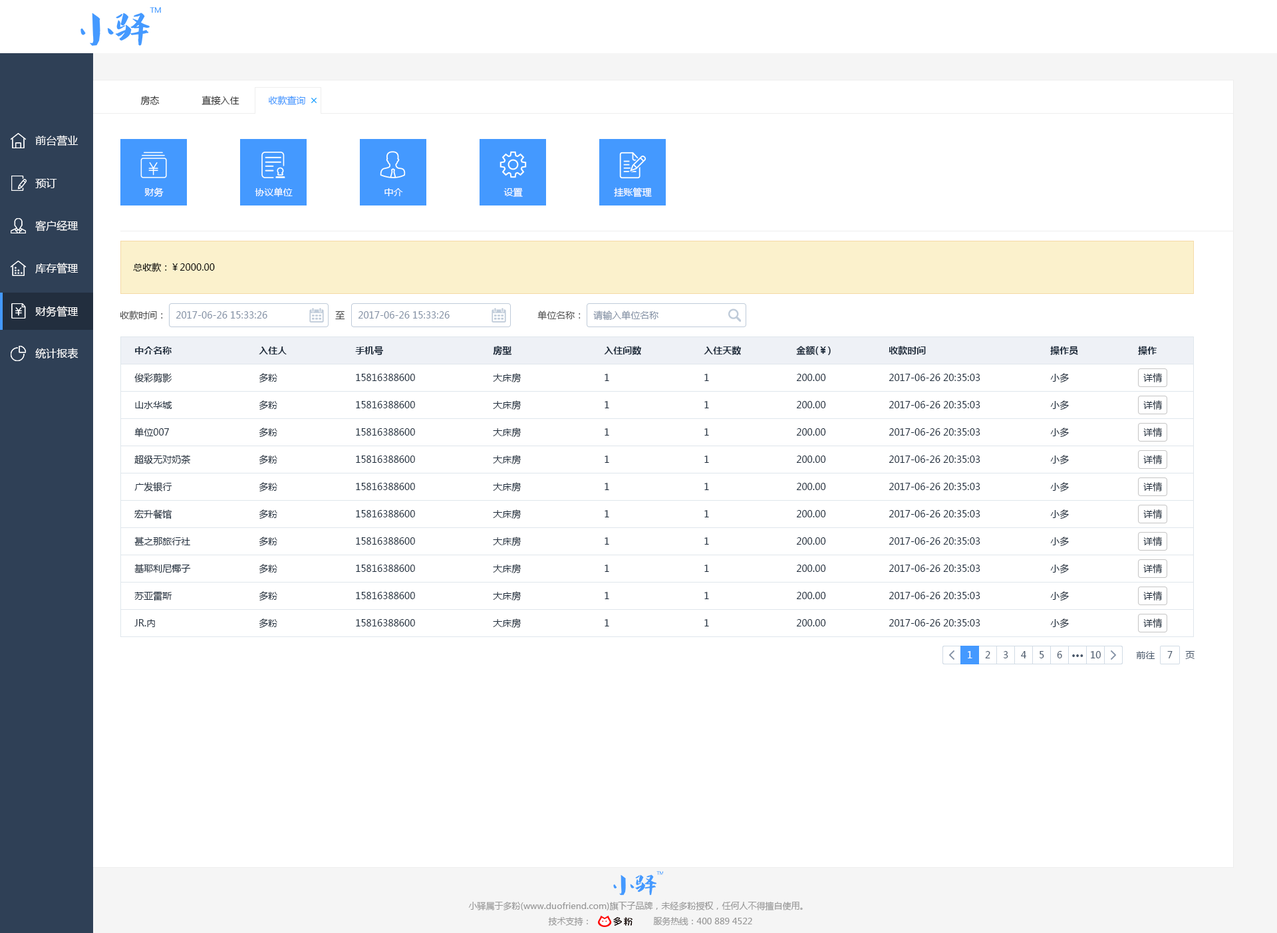
<style>
.page{position:relative;width:1277px;height:933px;background:#ffffff}
.page>*{position:absolute;margin:0}
.t1{font:9.3px "MicrosoftYaHei";color:#333333}
.t2{font:9.3px "MicrosoftYaHei";color:#4499ff}
.t3{font:10.6px "MicrosoftYaHei";color:#ffffff}
.t4{font:9.3px "MicrosoftYaHei";color:#ffffff}
.t5{font:9.3px "MicrosoftYaHei";color:#000000}
.t6{font:9.3px "MicrosoftYaHei";color:#505050}
.t7{font:9.3px "MicrosoftYaHei";color:#8391a5}
.t8{font:9.3px "MicrosoftYaHei-Bold";color:#1f2d3d}
.t9{font:9.3px "MicrosoftYaHei";color:#1f2d3d}
.t10{font:9.3px "MicrosoftYaHei";color:#48576a}
.t11{font:9.3px "MicrosoftYaHei-Bold";color:#48576a}
.t12{font:8.6px "MicrosoftYaHei";color:#999999}
</style>
<div class="page">
<p class="t1" style="left:140px;top:96px;width:20px;height:9px">房态</p>
<p class="t1" style="left:202px;top:96px;width:38px;height:9px">直接入住</p>
<p class="t2" style="left:269px;top:96px;width:36px;height:9px">收款查询</p>
<p class="t3" style="left:35px;top:135px;width:44px;height:11px">前台营业</p>
<p class="t3" style="left:35px;top:178px;width:22px;height:10px">预订</p>
<p class="t4" style="left:144px;top:188px;width:20px;height:9px">财务</p>
<p class="t4" style="left:255px;top:188px;width:38px;height:9px">协议单位</p>
<p class="t4" style="left:385px;top:188px;width:18px;height:8px">中介</p>
<p class="t4" style="left:504px;top:188px;width:19px;height:9px">设置</p>
<p class="t4" style="left:614px;top:188px;width:38px;height:10px">挂账管理</p>
<p class="t3" style="left:35px;top:220px;width:44px;height:12px">客户经理</p>
<p class="t3" style="left:35px;top:263px;width:44px;height:11px">库存管理</p>
<p class="t5" style="left:133px;top:263px;width:82px;height:9px">总收款：￥2000.00</p>
<p class="t3" style="left:35px;top:306px;width:44px;height:11px">财务管理</p>
<p class="t6" style="left:120px;top:311px;width:43px;height:9px">收款时间：</p>
<p class="t7" style="left:176px;top:311px;width:91px;height:8px">2017-06-26 15:33:26</p>
<p class="t6" style="left:335px;top:311px;width:10px;height:9px">至</p>
<p class="t7" style="left:358px;top:311px;width:92px;height:8px">2017-06-26 15:33:26</p>
<p class="t6" style="left:538px;top:311px;width:43px;height:9px">单位名称：</p>
<p class="t7" style="left:593px;top:311px;width:66px;height:10px">请输入单位名称</p>
<p class="t3" style="left:35px;top:348px;width:44px;height:11px">统计报表</p>
<p class="t8" style="left:135px;top:347px;width:37px;height:8px">中介名称</p>
<p class="t8" style="left:259px;top:347px;width:28px;height:8px">入住人</p>
<p class="t8" style="left:355px;top:346px;width:28px;height:9px">手机号</p>
<p class="t8" style="left:493px;top:346px;width:19px;height:9px">房型</p>
<p class="t8" style="left:604px;top:346px;width:37px;height:9px">入住间数</p>
<p class="t8" style="left:704px;top:346px;width:37px;height:9px">入住天数</p>
<p class="t8" style="left:796px;top:346px;width:35px;height:9px">金额(￥)</p>
<p class="t8" style="left:889px;top:346px;width:37px;height:9px">收款时间</p>
<p class="t8" style="left:1051px;top:346px;width:28px;height:9px">操作员</p>
<p class="t8" style="left:1138px;top:346px;width:19px;height:9px">操作</p>
<p class="t9" style="left:134px;top:373px;width:38px;height:10px">俊彩剪影</p>
<p class="t9" style="left:259px;top:373px;width:18px;height:10px">多粉</p>
<p class="t9" style="left:356px;top:374px;width:59px;height:7px">15816388600</p>
<p class="t9" style="left:493px;top:373px;width:29px;height:10px">大床房</p>
<p class="t9" style="left:605px;top:374px;width:4px;height:7px">1</p>
<p class="t9" style="left:705px;top:374px;width:4px;height:7px">1</p>
<p class="t9" style="left:796px;top:374px;width:30px;height:7px">200.00</p>
<p class="t9" style="left:889px;top:374px;width:92px;height:7px">2017-06-26 20:35:03</p>
<p class="t9" style="left:1051px;top:373px;width:18px;height:10px">小多</p>
<p class="t9" style="left:1144px;top:373px;width:19px;height:10px">详情</p>
<p class="t9" style="left:135px;top:401px;width:37px;height:8px">山水华城</p>
<p class="t9" style="left:259px;top:401px;width:18px;height:10px">多粉</p>
<p class="t9" style="left:356px;top:401px;width:59px;height:8px">15816388600</p>
<p class="t9" style="left:493px;top:401px;width:29px;height:10px">大床房</p>
<p class="t9" style="left:605px;top:401px;width:4px;height:8px">1</p>
<p class="t9" style="left:705px;top:401px;width:4px;height:8px">1</p>
<p class="t9" style="left:796px;top:401px;width:30px;height:8px">200.00</p>
<p class="t9" style="left:889px;top:401px;width:92px;height:8px">2017-06-26 20:35:03</p>
<p class="t9" style="left:1051px;top:401px;width:18px;height:10px">小多</p>
<p class="t9" style="left:1144px;top:401px;width:19px;height:9px">详情</p>
<p class="t9" style="left:134px;top:428px;width:35px;height:9px">单位007</p>
<p class="t9" style="left:259px;top:428px;width:18px;height:10px">多粉</p>
<p class="t9" style="left:356px;top:428px;width:59px;height:8px">15816388600</p>
<p class="t9" style="left:493px;top:428px;width:29px;height:10px">大床房</p>
<p class="t9" style="left:605px;top:428px;width:4px;height:8px">1</p>
<p class="t9" style="left:705px;top:428px;width:4px;height:8px">1</p>
<p class="t9" style="left:796px;top:428px;width:30px;height:8px">200.00</p>
<p class="t9" style="left:889px;top:428px;width:92px;height:8px">2017-06-26 20:35:03</p>
<p class="t9" style="left:1051px;top:428px;width:18px;height:10px">小多</p>
<p class="t9" style="left:1144px;top:428px;width:19px;height:9px">详情</p>
<p class="t9" style="left:134px;top:455px;width:57px;height:9px">超级无对奶茶</p>
<p class="t9" style="left:259px;top:455px;width:18px;height:10px">多粉</p>
<p class="t9" style="left:356px;top:456px;width:59px;height:7px">15816388600</p>
<p class="t9" style="left:493px;top:455px;width:29px;height:10px">大床房</p>
<p class="t9" style="left:605px;top:456px;width:4px;height:7px">1</p>
<p class="t9" style="left:705px;top:456px;width:4px;height:7px">1</p>
<p class="t9" style="left:796px;top:456px;width:30px;height:7px">200.00</p>
<p class="t9" style="left:889px;top:456px;width:92px;height:7px">2017-06-26 20:35:03</p>
<p class="t9" style="left:1051px;top:455px;width:18px;height:10px">小多</p>
<p class="t9" style="left:1144px;top:455px;width:19px;height:9px">详情</p>
<p class="t9" style="left:134px;top:482px;width:38px;height:10px">广发银行</p>
<p class="t9" style="left:259px;top:482px;width:18px;height:10px">多粉</p>
<p class="t9" style="left:356px;top:483px;width:59px;height:7px">15816388600</p>
<p class="t9" style="left:493px;top:482px;width:29px;height:10px">大床房</p>
<p class="t9" style="left:605px;top:483px;width:4px;height:7px">1</p>
<p class="t9" style="left:705px;top:483px;width:4px;height:7px">1</p>
<p class="t9" style="left:796px;top:483px;width:30px;height:7px">200.00</p>
<p class="t9" style="left:889px;top:483px;width:92px;height:7px">2017-06-26 20:35:03</p>
<p class="t9" style="left:1051px;top:482px;width:18px;height:10px">小多</p>
<p class="t9" style="left:1144px;top:482px;width:19px;height:10px">详情</p>
<p class="t9" style="left:134px;top:510px;width:38px;height:10px">宏升餐馆</p>
<p class="t9" style="left:259px;top:510px;width:18px;height:10px">多粉</p>
<p class="t9" style="left:493px;top:510px;width:29px;height:10px">大床房</p>
<p class="t9" style="left:1051px;top:510px;width:18px;height:10px">小多</p>
<p class="t9" style="left:1144px;top:510px;width:19px;height:9px">详情</p>
<p class="t9" style="left:356px;top:510px;width:59px;height:8px">15816388600</p>
<p class="t9" style="left:605px;top:510px;width:4px;height:8px">1</p>
<p class="t9" style="left:705px;top:510px;width:4px;height:8px">1</p>
<p class="t9" style="left:796px;top:510px;width:30px;height:8px">200.00</p>
<p class="t9" style="left:889px;top:510px;width:92px;height:8px">2017-06-26 20:35:03</p>
<p class="t9" style="left:134px;top:537px;width:56px;height:9px">甚之那旅行社</p>
<p class="t9" style="left:259px;top:537px;width:18px;height:10px">多粉</p>
<p class="t9" style="left:356px;top:538px;width:59px;height:7px">15816388600</p>
<p class="t9" style="left:493px;top:537px;width:29px;height:10px">大床房</p>
<p class="t9" style="left:605px;top:538px;width:4px;height:7px">1</p>
<p class="t9" style="left:705px;top:538px;width:4px;height:7px">1</p>
<p class="t9" style="left:796px;top:538px;width:30px;height:7px">200.00</p>
<p class="t9" style="left:889px;top:538px;width:92px;height:7px">2017-06-26 20:35:03</p>
<p class="t9" style="left:1051px;top:537px;width:18px;height:10px">小多</p>
<p class="t9" style="left:1144px;top:537px;width:19px;height:9px">详情</p>
<p class="t9" style="left:134px;top:564px;width:57px;height:10px">基耶利尼椰子</p>
<p class="t9" style="left:259px;top:564px;width:18px;height:10px">多粉</p>
<p class="t9" style="left:356px;top:565px;width:59px;height:7px">15816388600</p>
<p class="t9" style="left:493px;top:564px;width:29px;height:10px">大床房</p>
<p class="t9" style="left:605px;top:565px;width:4px;height:7px">1</p>
<p class="t9" style="left:705px;top:565px;width:4px;height:7px">1</p>
<p class="t9" style="left:796px;top:565px;width:30px;height:7px">200.00</p>
<p class="t9" style="left:889px;top:565px;width:92px;height:7px">2017-06-26 20:35:03</p>
<p class="t9" style="left:1051px;top:564px;width:18px;height:10px">小多</p>
<p class="t9" style="left:1144px;top:564px;width:19px;height:10px">详情</p>
<p class="t9" style="left:134px;top:591px;width:38px;height:10px">苏亚雷斯</p>
<p class="t9" style="left:259px;top:591px;width:18px;height:10px">多粉</p>
<p class="t9" style="left:356px;top:592px;width:59px;height:7px">15816388600</p>
<p class="t9" style="left:493px;top:591px;width:29px;height:10px">大床房</p>
<p class="t9" style="left:605px;top:592px;width:4px;height:7px">1</p>
<p class="t9" style="left:705px;top:592px;width:4px;height:7px">1</p>
<p class="t9" style="left:796px;top:592px;width:30px;height:7px">200.00</p>
<p class="t9" style="left:889px;top:592px;width:92px;height:7px">2017-06-26 20:35:03</p>
<p class="t9" style="left:1051px;top:591px;width:18px;height:10px">小多</p>
<p class="t9" style="left:1144px;top:591px;width:19px;height:10px">详情</p>
<p class="t9" style="left:134px;top:619px;width:21px;height:8px">JR.内</p>
<p class="t9" style="left:259px;top:619px;width:18px;height:10px">多粉</p>
<p class="t9" style="left:356px;top:619px;width:59px;height:8px">15816388600</p>
<p class="t9" style="left:493px;top:619px;width:29px;height:10px">大床房</p>
<p class="t9" style="left:605px;top:619px;width:4px;height:8px">1</p>
<p class="t9" style="left:705px;top:619px;width:4px;height:8px">1</p>
<p class="t9" style="left:796px;top:619px;width:30px;height:8px">200.00</p>
<p class="t9" style="left:889px;top:619px;width:92px;height:8px">2017-06-26 20:35:03</p>
<p class="t9" style="left:1051px;top:619px;width:18px;height:10px">小多</p>
<p class="t9" style="left:1144px;top:619px;width:19px;height:9px">详情</p>
<p class="t4" style="left:968px;top:651px;width:5px;height:8px">1</p>
<p class="t10" style="left:985px;top:651px;width:6px;height:8px">2</p>
<p class="t10" style="left:1003px;top:651px;width:6px;height:8px">3</p>
<p class="t10" style="left:1021px;top:651px;width:6px;height:8px">4</p>
<p class="t10" style="left:1040px;top:651px;width:5px;height:8px">5</p>
<p class="t10" style="left:1057px;top:651px;width:6px;height:8px">6</p>
<p class="t10" style="left:1091px;top:651px;width:10px;height:8px">10</p>
<p class="t10" style="left:1136px;top:651px;width:20px;height:8px">前往</p>
<p class="t10" style="left:1168px;top:651px;width:5px;height:8px">7</p>
<p class="t10" style="left:1186px;top:651px;width:9px;height:8px">页</p>
<p class="t11" style="left:1073px;top:655px;width:11px;height:2px">···</p>
<p class="t12" style="left:468px;top:902px;width:335px;height:9px">小驿属于多粉(www.duofriend.com)旗下子品牌，未经多粉授权，任何人不得擅自使用。</p>
<p class="t12" style="left:548px;top:917px;width:40px;height:9px">技术支持：</p>
<p class="t12" style="left:653px;top:917px;width:99px;height:9px">服务热线：400 889 4522</p>
</div>
